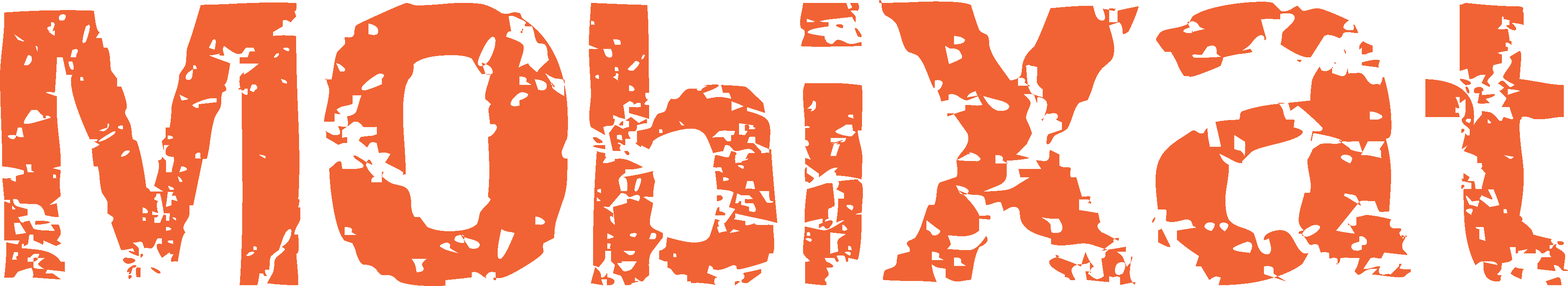
<style>
.page{position:relative;width:1568px;height:286px;background:#ffffff}
.page>*{position:absolute;margin:0}
.t1{font:282.3px "Destroy";color:#f16334}
</style>
<div class="page">
<p class="t1" style="left:0px;top:0px;width:1568px;height:286px">Mobixat</p>
</div>
